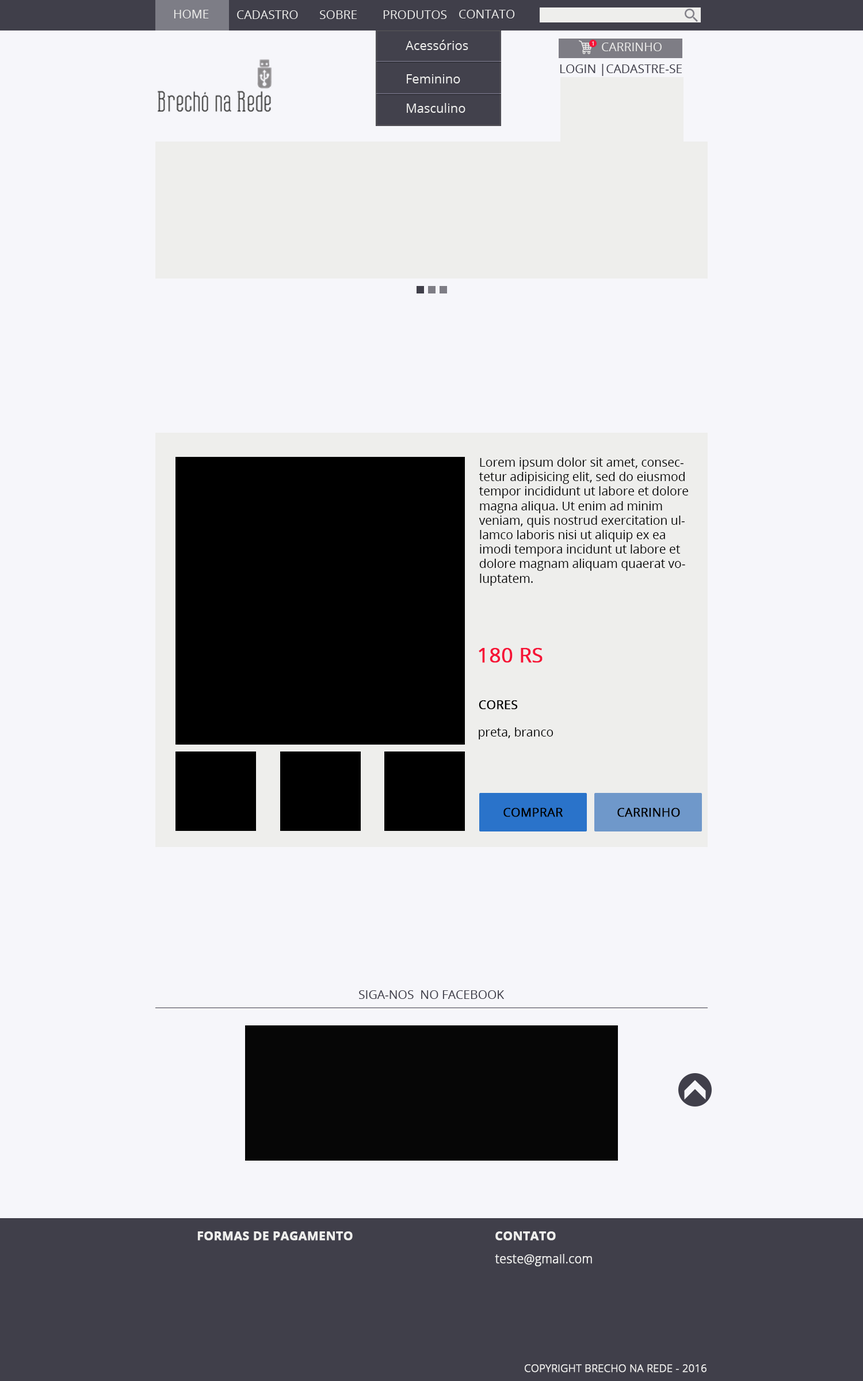
<style>
.page{position:relative;width:863px;height:1381px;background:#f6f6fa}
.page>*{position:absolute;margin:0}
.t1{font:12.1px "OpenSans";color:#eeeeec;text-transform:uppercase}
.t2{font:12.7px "OpenSans";color:#eeeeec}
.t3{font:5.6px "OpenSans";text-transform:uppercase;scale:1.08 1}
.t4{font:12.1px "OpenSans";color:#403f4a;text-transform:uppercase}
.t5{font:12.1px "OpenSans";color:#000000}
.t6{font:20px "OpenSans";color:#f61337;text-transform:uppercase;font-weight:bold}
.t7{font:12.1px "OpenSans";color:#000000;text-transform:uppercase;font-weight:bold}
.t8{font:12.1px "OpenSans-Bold";color:#eeeeec;text-transform:uppercase;font-weight:bold}
.t9{font:12.1px "OpenSans-Light";color:#eeeeec;font-weight:bold}
.t10{font:10.4px "OpenSans-Light";color:#eeeeec;font-weight:bold}
</style>
<div class="page">
<p class="t1" style="left:174px;top:10px;width:35px;height:8px">Home</p>
<p class="t1" style="left:237px;top:10px;width:61px;height:9px">Cadastro</p>
<p class="t1" style="left:320px;top:10px;width:37px;height:9px">Sobre</p>
<p class="t1" style="left:383px;top:10px;width:64px;height:9px">Produtos</p>
<p class="t1" style="left:459px;top:10px;width:56px;height:8px">Contato</p>
<p class="t2" style="left:406px;top:40px;width:62px;height:10px">Acessórios</p>
<p class="t3" style="left:592px;top:41px;width:2px;height:5px">1</p>
<p class="t1" style="left:602px;top:43px;width:60px;height:8px">Carrinho</p>
<p class="t4" style="left:560px;top:64px;width:122px;height:12px">Login |Cadastre-se</p>
<p class="t2" style="left:407px;top:74px;width:53px;height:9px">Feminino</p>
<p class="t2" style="left:407px;top:103px;width:59px;height:10px">Masculino</p>
<p class="t5" style="left:479px;top:458px;width:209px;height:128px">Lorem ipsum dolor sit amet, consectetur adipisicing elit, sed do eiusmod tempor incididunt ut labore et dolore magna aliqua. Ut enim ad minim veniam, quis nostrud exercitation ullamco laboris nisi ut aliquip ex ea  imodi tempora incidunt ut labore et dolore magnam aliquam quaerat voluptatem.</p>
<p class="t6" style="left:479px;top:648px;width:64px;height:15px">180 rs</p>
<p class="t7" style="left:479px;top:700px;width:39px;height:10px">CORES</p>
<p class="t5" style="left:479px;top:727px;width:75px;height:13px">preta, branco</p>
<p class="t7" style="left:504px;top:808px;width:59px;height:9px">cOMPRAR</p>
<p class="t7" style="left:618px;top:808px;width:62px;height:9px">CARRINHO</p>
<p class="t4" style="left:359px;top:990px;width:145px;height:9px">siga-nos  no facebook</p>
<p class="t8" style="left:197px;top:1232px;width:156px;height:9px">formas de pagamento</p>
<p class="t8" style="left:496px;top:1232px;width:60px;height:9px">contATO</p>
<p class="t9" style="left:495px;top:1254px;width:97px;height:13px">teste@gmail.com</p>
<p class="t10" style="left:525px;top:1365px;width:182px;height:8px">COPYRIGHT BRECHO NA REDE - 2016</p>
</div>
